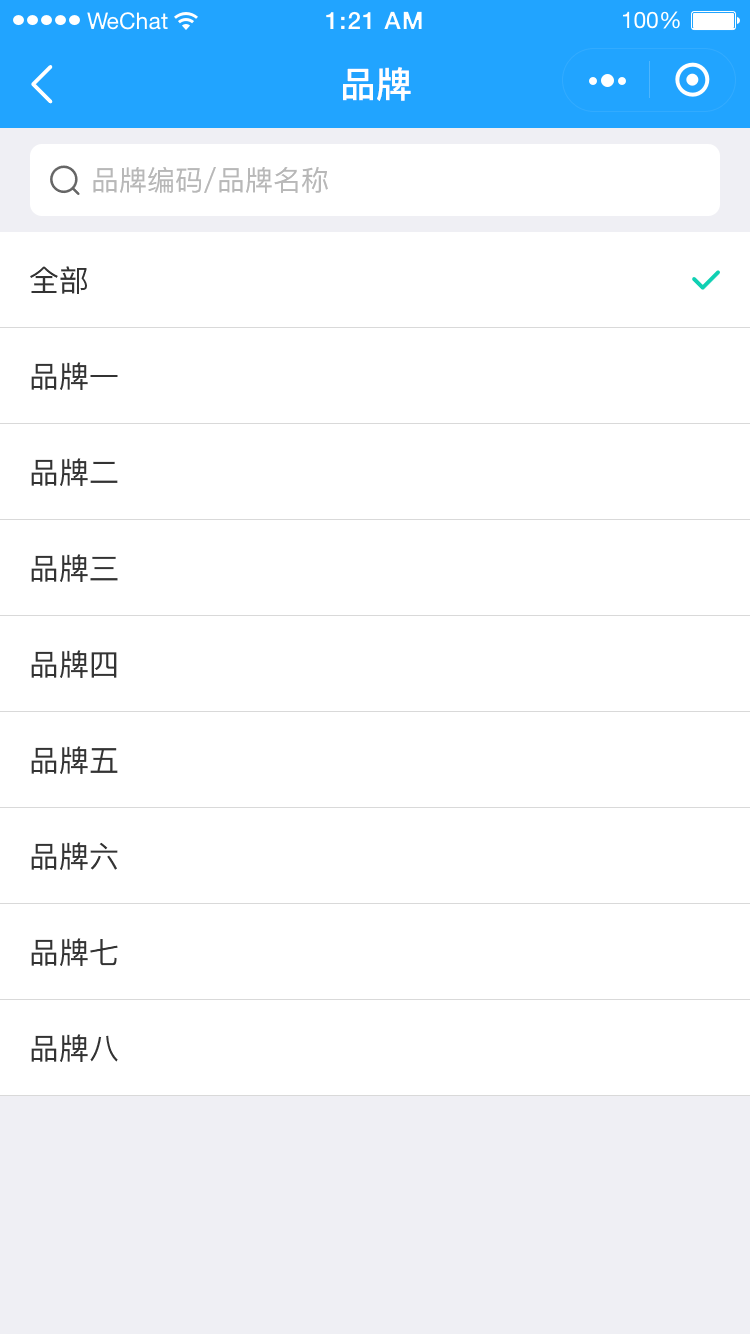
<style>
.page{position:relative;width:750px;height:1334px;background:#ffffff}
.page>*{position:absolute;margin:0}
.t1{font:36px "PingFang-SC-Bold";color:#ffffff}
.t2{font:28px "PingFang-SC-Medium";color:#b8b8b8}
.t3{font:30px "PingFang-SC-Medium";color:#333333}
</style>
<div class="page">
<p class="t1" style="left:343px;top:67px;width:68px;height:34px">品牌</p>
<p class="t2" style="left:93px;top:167px;width:235px;height:26px">品牌编码/品牌名称</p>
<p class="t3" style="left:30px;top:266px;width:57px;height:28px">全部</p>
<p class="t3" style="left:31px;top:362px;width:87px;height:28px">品牌一</p>
<p class="t3" style="left:31px;top:458px;width:87px;height:28px">品牌二</p>
<p class="t3" style="left:31px;top:554px;width:87px;height:28px">品牌三</p>
<p class="t3" style="left:31px;top:650px;width:86px;height:28px">品牌四</p>
<p class="t3" style="left:31px;top:746px;width:87px;height:28px">品牌五</p>
<p class="t3" style="left:31px;top:842px;width:87px;height:28px">品牌六</p>
<p class="t3" style="left:31px;top:938px;width:87px;height:28px">品牌七</p>
<p class="t3" style="left:31px;top:1034px;width:87px;height:28px">品牌八</p>
</div>
